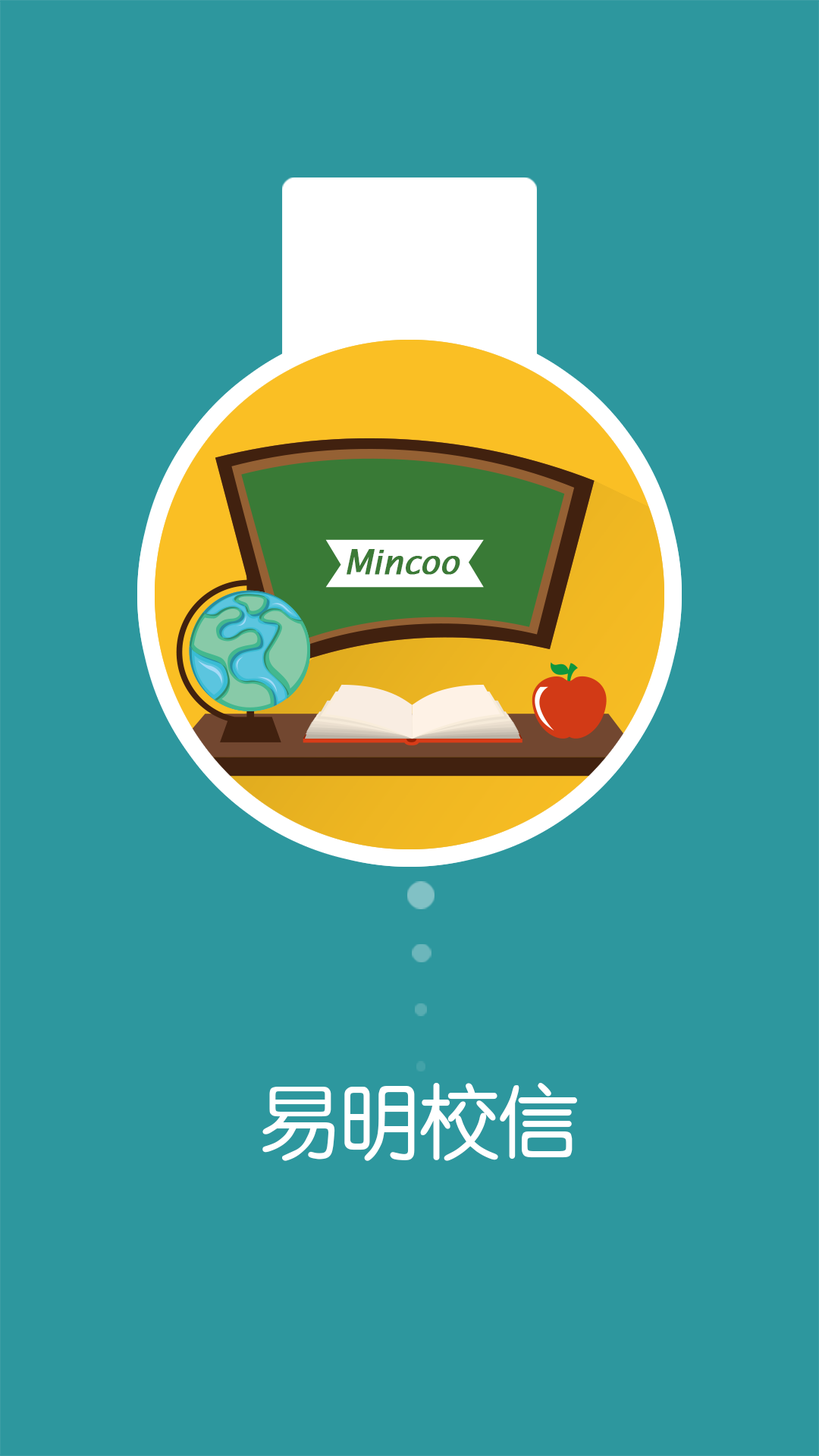
<style>
.page{position:relative;width:819px;height:1456px;background:#2d979e}
.page>*{position:absolute;margin:0}
.t1{font:34.1px "LucidaSans-Italic";letter-spacing:-0.029em;color:#3c7a37;font-weight:bold}
.t2{font:81.9px "HYe3gj";letter-spacing:-0.029em;color:#ffffff}
</style>
<div class="page">
<p class="t1" style="left:347px;top:549px;width:113px;height:26px">Mincoo</p>
<p class="t2" style="left:262px;top:1082px;width:315px;height:79px">易明校信</p>
</div>
